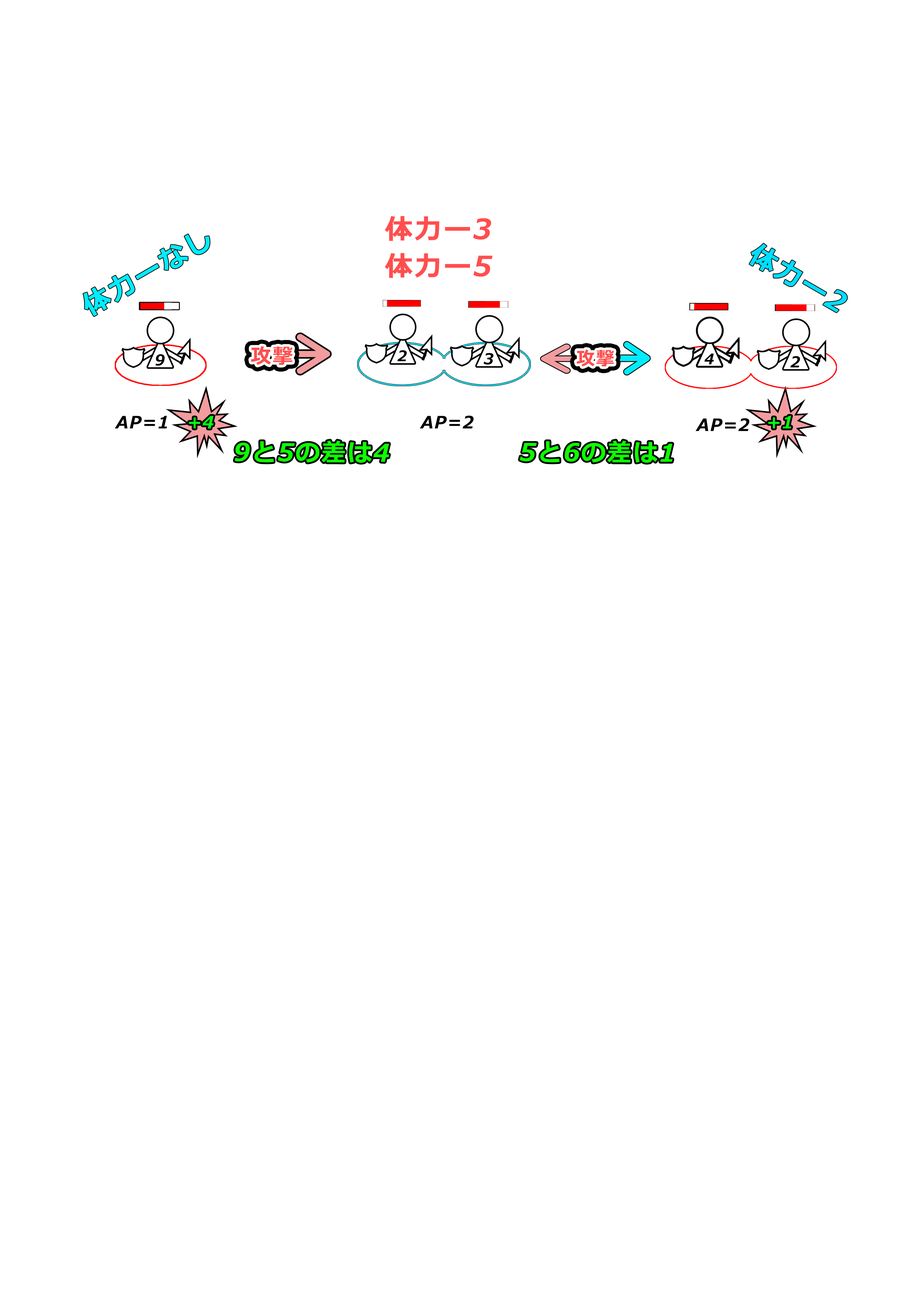
<style>
.page{position:relative;width:918px;height:1299px;background:#ffffff}
.page>*{position:absolute;margin:0}
.t1{font:27.8px/37px "Meiryo-BoldItalic";letter-spacing:0.06em;color:#ff4e4e}
.t2{font:27.8px "Meiryo-BoldItalic";letter-spacing:0.06em;color:#00edff}
.t3{font:27.8px "Meiryo-BoldItalic";letter-spacing:0.06em;color:#00deff}
.t4{font:14.9px "Meiryo-BoldItalic";letter-spacing:0.06em;color:#000000}
.t5{font:20.6px "Meiryo-BoldItalic";letter-spacing:0.06em;color:#ff4e4e}
.t6{font:14.5px "Meiryo-BoldItalic";letter-spacing:0.06em;color:#000000}
.t7{font:15.1px "Meiryo-BoldItalic";letter-spacing:0.06em;color:#000000}
.t8{font:18.6px "Meiryo-BoldItalic";letter-spacing:0.06em;color:#ff4e4e}
.t9{font:15px "Meiryo-BoldItalic";letter-spacing:0.06em;color:#000000}
.t10{font:17px "Meiryo-BoldItalic";letter-spacing:0.06em;color:#000000}
.t11{font:17px "Meiryo-BoldItalic";letter-spacing:0.06em;color:#00ff12}
.t12{font:24.4px "Meiryo-BoldItalic";letter-spacing:0.06em;color:#0cff00}
</style>
<div class="page">
<p class="t1" style="left:385px;top:216px;width:108px;height:62px;text-align:center">体力ー3<br>体力ー5</p>
<p class="t2" style="left:83px;top:234px;width:127px;height:82px;rotate:-30deg">体力ーなし</p>
<p class="t3" style="left:749px;top:243px;width:98px;height:69px;rotate:30deg">体力ー2</p>
<p class="t4" style="left:155px;top:354px;width:10px;height:12px">9</p>
<p class="t5" style="left:251px;top:346px;width:42px;height:19px">攻撃</p>
<p class="t6" style="left:397px;top:350px;width:10px;height:11px">2</p>
<p class="t7" style="left:484px;top:353px;width:10px;height:12px">3</p>
<p class="t8" style="left:576px;top:349px;width:38px;height:18px">攻撃</p>
<p class="t6" style="left:705px;top:353px;width:9px;height:11px">4</p>
<p class="t9" style="left:790px;top:356px;width:10px;height:12px">2</p>
<p class="t10" style="left:115px;top:416px;width:52px;height:12px">AP=1</p>
<p class="t11" style="left:189px;top:416px;width:25px;height:13px">+4</p>
<p class="t10" style="left:420px;top:415px;width:54px;height:13px">AP=2</p>
<p class="t10" style="left:696px;top:418px;width:54px;height:13px">AP=2</p>
<p class="t11" style="left:768px;top:416px;width:24px;height:12px">+1</p>
<p class="t12" style="left:235px;top:441px;width:154px;height:22px">9と5の差は4</p>
<p class="t12" style="left:520px;top:441px;width:153px;height:22px">5と6の差は1</p>
</div>
